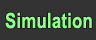
<style>
.page{position:relative;width:96px;height:40px;background:#333333}
.page>*{position:absolute;margin:0}
.t1{font:21px "Arial-BoldMT";letter-spacing:0.01em;color:#8eff88;scale:0.8 1}
</style>
<div class="page">
<p class="t1" style="left:5px;top:12px;width:87px;height:17px">Simulation</p>
</div>
